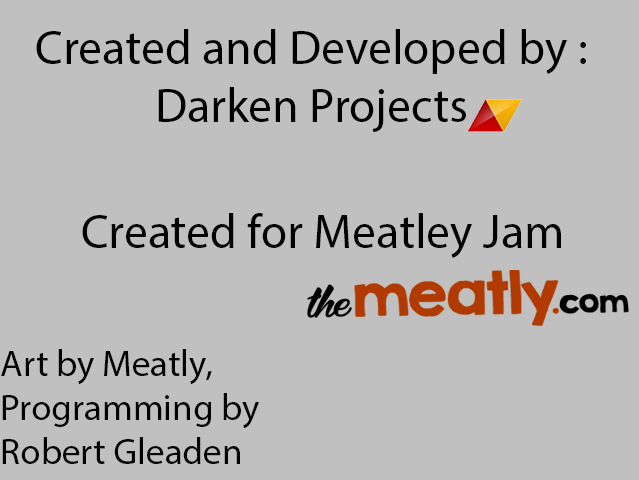
<style>
.page{position:relative;width:639px;height:480px;background:#c0c0c0}
.page>*{position:absolute;margin:0}
.t1{font:48px "MyriadPro-Regular";color:#000000}
.t2{font:48px "MyriadPro-Regular";color:#030303}
.t3{font:37px "MyriadPro-Regular";color:#030303}
</style>
<div class="page">
<p class="t1" style="left:36px;top:29px;width:550px;height:103px;text-align:center">Created and Developed by :<br>Darken Projects</p>
<p class="t2" style="left:82px;top:213px;width:479px;height:45px">Created for Meatley Jam</p>
<p class="t3" style="left:1px;top:349px;width:258px;height:115px">Art by Meatly, <br>Programming by<br>Robert Gleaden</p>
</div>
